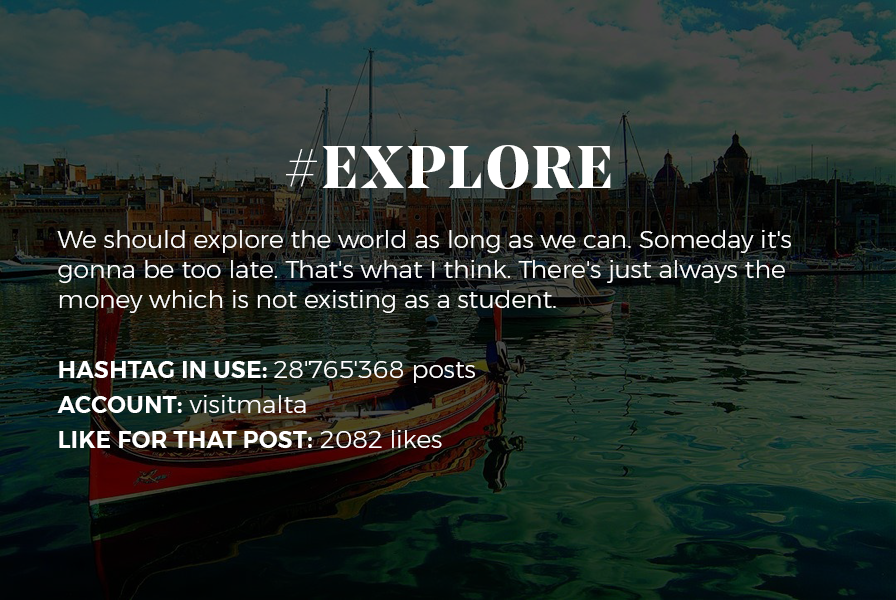
<style>
.page{position:relative;width:896px;height:600px}
.page>*{position:absolute;margin:0}
.t1{font:25px "Montserrat-Light";color:#ffffff}
.t2{font:60px "NoeDisplay-Bold";letter-spacing:0.05em;color:#ffffff;text-transform:uppercase}
.t3{font:23px/35px "Montserrat-SemiBold";letter-spacing:0.02em;color:#ffffff;text-transform:uppercase}
.t4{font:25px/35px "Montserrat-Light";color:#ffffff}
</style>
<div class="page">
<p class="t1" style="left:57px;top:145px;width:734px;height:303px;text-align:center"><span class="t2">#explore<br></span><br>We should explore the world as long as we can. Someday it's gonna be too late. That's what I think. There's just always the money which is not existing as a student. <br><br><span class="t3">Hashtag in use: </span><span class="t4">28'765'368 posts<br></span><span class="t3">Account:</span><span class="t4"> visitmalta<br></span><span class="t3">Like for that post:</span><span class="t4"> 2082 likes</span></p>
</div>
